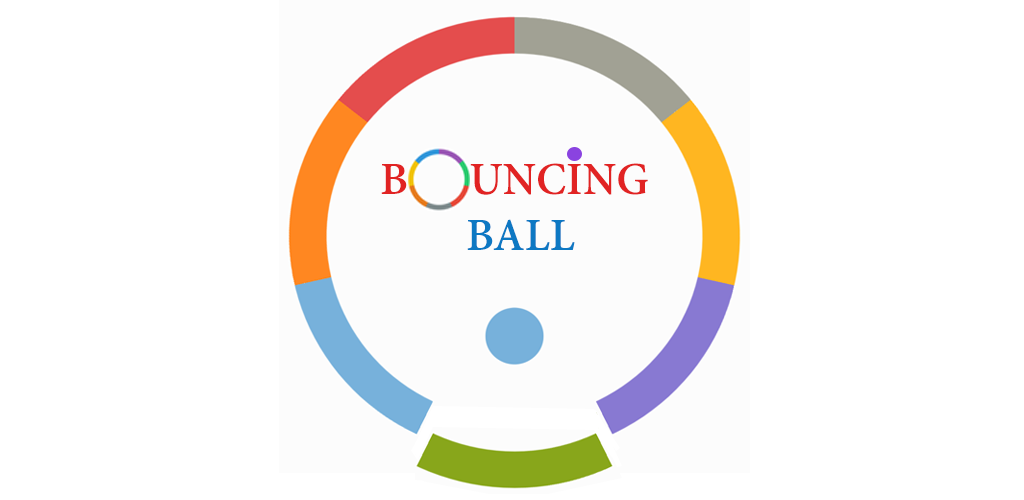
<style>
.page{position:relative;width:1024px;height:500px;background:#ffffff}
.page>*{position:absolute;margin:0}
.t1{font:50px "AdobeGurmukhi-Bold";color:#e12323}
.t2{font:50px "AdobeGurmukhi-Bold";color:#0d78c3}
</style>
<div class="page">
<p class="t1" style="left:381px;top:163px;width:267px;height:32px">B      UNCING</p>
<p class="t2" style="left:467px;top:219px;width:108px;height:31px">BALL</p>
</div>
